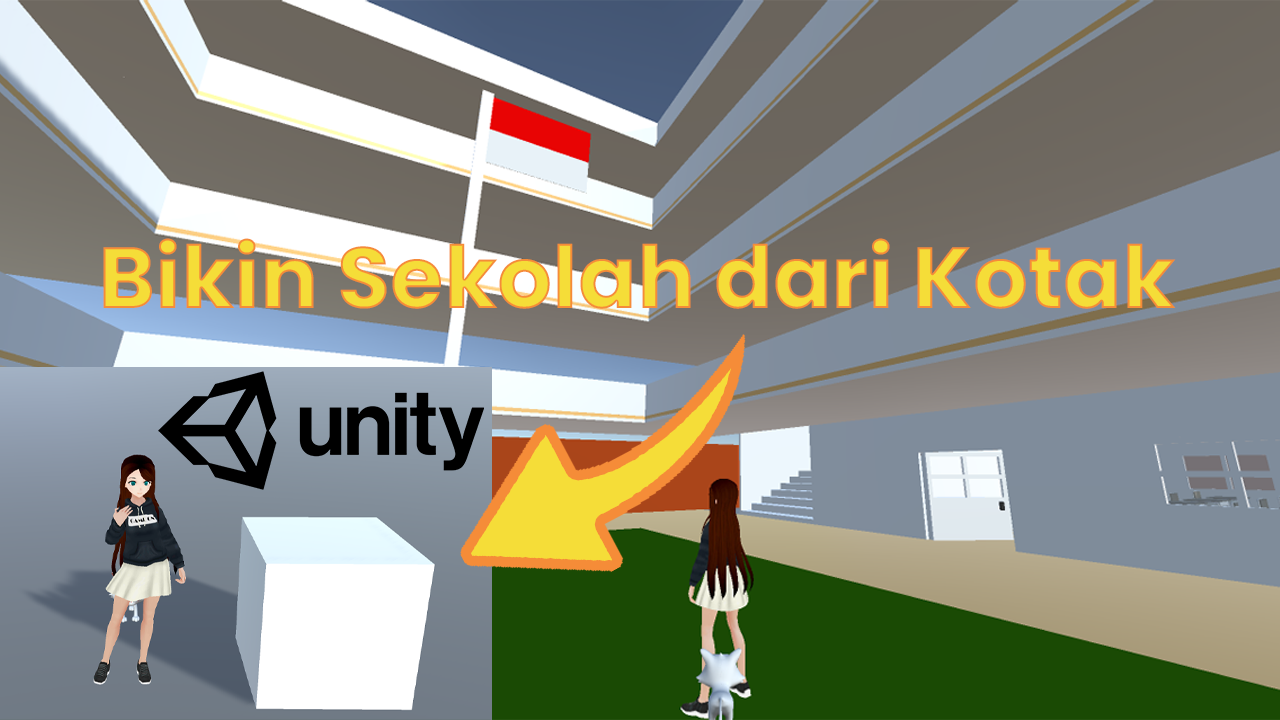
<style>
.page{position:relative;width:1280px;height:720px}
.page>*{position:absolute;margin:0}
.t1{font:86.7px "Poppins-Bold";color:#f5dd38}
</style>
<div class="page">
<p class="t1" style="left:103px;top:238px;width:1073px;height:71px">Bikin Sekolah dari Kotak</p>
</div>
